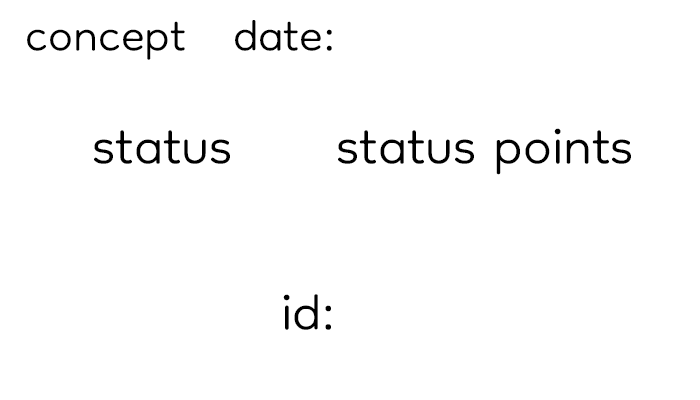
<style>
.page{position:relative;width:700px;height:400px;background:#ffffff}
.page>*{position:absolute;margin:0}
.t1{font:70px "Dongle-Light";color:#000000}
.t2{font:80.8px "Dongle-Light";color:#000000}
</style>
<div class="page">
<p class="t1" style="left:27px;top:21px;width:158px;height:39px">concept</p>
<p class="t1" style="left:235px;top:20px;width:97px;height:31px">date:</p>
<p class="t2" style="left:94px;top:130px;width:136px;height:34px">status</p>
<p class="t2" style="left:338px;top:128px;width:293px;height:47px">status points</p>
<p class="t2" style="left:283px;top:294px;width:48px;height:36px">id:</p>
</div>
